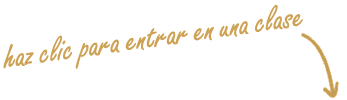
<style>
.page{position:relative;width:347px;height:100px;background:#ffffff}
.page>*{position:absolute;margin:0}
.t1{font:36px "Carefree";color:#cda254}
</style>
<div class="page">
<p class="t1" style="left:3px;top:4px;width:300px;height:65px;rotate:-8deg">haz clic para entrar en una clase</p>
</div>
